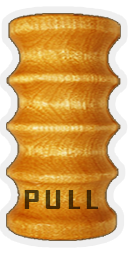
<style>
.page{position:relative;width:128px;height:256px}
.page>*{position:absolute;margin:0}
.t1{font:25.4px "AgencyFB-Bold";letter-spacing:0.12em;color:#4c3006;scale:1.49 1}
</style>
<div class="page">
<p class="t1" style="left:24px;top:190px;width:75px;height:19px">PULL</p>
</div>
